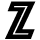
<style>
.page{position:relative;width:40px;height:40px;background:#ffffff}
.page>*{position:absolute;margin:0}
.t1{font:56.2px "Phosphate-Inline";color:#000000}
</style>
<div class="page">
<p class="t1" style="left:5px;top:1px;width:31px;height:38px">z</p>
</div>
